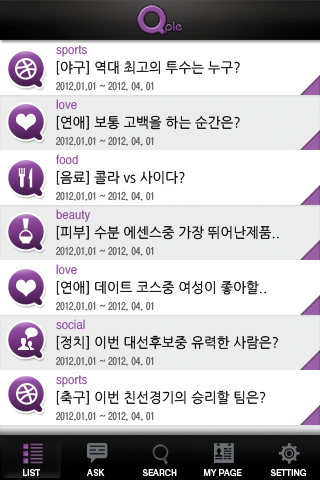
<style>
.page{position:relative;width:320px;height:480px;background:#ffffff}
.page>*{position:absolute;margin:0}
.t1{font:12px "YGO530";color:#914d9e;scale:0.97 1}
.t2{font:14px "NanumGothic";color:#000000;scale:0.97 1}
.t3{font:10px "YGO530";color:#5a5a5b;scale:0.97 1}
.t4{font:8.7px "HelveticaNeueLTPro-Md";color:#ffffff;scale:0.97 1}
</style>
<div class="page">
<p class="t1" style="left:56px;top:45px;width:31px;height:12px">sports</p>
<p class="t2" style="left:56px;top:60px;width:184px;height:15px">[야구] 역대 최고의 투수는 누구?</p>
<p class="t3" style="left:56px;top:81px;width:98px;height:10px">2012.01.01 ~ 2012. 04. 01</p>
<p class="t1" style="left:56px;top:99px;width:21px;height:11px">love</p>
<p class="t2" style="left:56px;top:115px;width:184px;height:15px">[연애] 보통 고백을 하는 순간은?</p>
<p class="t3" style="left:56px;top:136px;width:98px;height:10px">2012.01.01 ~ 2012. 04. 01</p>
<p class="t1" style="left:56px;top:154px;width:22px;height:11px">food</p>
<p class="t2" style="left:56px;top:170px;width:129px;height:15px">[음료] 콜라 vs 사이다?</p>
<p class="t3" style="left:56px;top:191px;width:98px;height:10px">2012.01.01 ~ 2012. 04. 01</p>
<p class="t1" style="left:56px;top:209px;width:34px;height:13px">beauty</p>
<p class="t2" style="left:56px;top:225px;width:223px;height:15px">[피부] 수분 에센스중 가장 뛰어난제품..</p>
<p class="t3" style="left:56px;top:246px;width:98px;height:10px">2012.01.01 ~ 2012. 04. 01</p>
<p class="t1" style="left:56px;top:264px;width:21px;height:11px">love</p>
<p class="t2" style="left:56px;top:280px;width:210px;height:15px">[연애] 데이트 코스중 여성이 좋아할..</p>
<p class="t3" style="left:56px;top:301px;width:98px;height:10px">2012.01.01 ~ 2012. 04. 01</p>
<p class="t1" style="left:56px;top:319px;width:29px;height:11px">social</p>
<p class="t2" style="left:56px;top:335px;width:222px;height:15px">[정치] 이번 대선후보중 유력한 사람은?</p>
<p class="t3" style="left:56px;top:356px;width:98px;height:10px">2012.01.01 ~ 2012. 04. 01</p>
<p class="t1" style="left:56px;top:375px;width:31px;height:12px">sports</p>
<p class="t2" style="left:56px;top:390px;width:210px;height:15px">[축구] 이번 친선경기의 승리할 팀은?</p>
<p class="t3" style="left:56px;top:411px;width:98px;height:10px">2012.01.01 ~ 2012. 04. 01</p>
<p class="t4" style="left:23px;top:469px;width:18px;height:7px">LIST</p>
<p class="t4" style="left:86px;top:469px;width:19px;height:7px">ASK</p>
<p class="t4" style="left:142px;top:469px;width:35px;height:7px">SEARCH</p>
<p class="t4" style="left:204px;top:469px;width:38px;height:7px">MY PAGE</p>
<p class="t4" style="left:270px;top:469px;width:36px;height:7px">SETTING</p>
</div>
